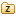
<style>
.page{position:relative;width:16px;height:16px;background:#ffffff}
.page>*{position:absolute;margin:0}
.t1{font:8px "MyriadPro-Regular";color:#252525}
</style>
<div class="page">
<p class="t1" style="left:5px;top:6px;width:5px;height:6px">Z</p>
</div>
